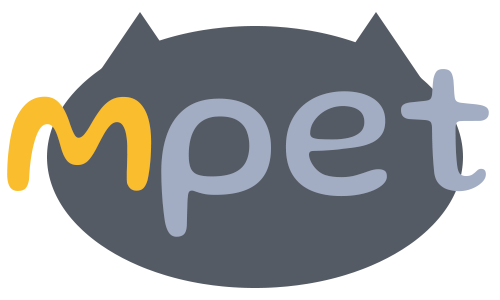
<style>
.page{position:relative;width:500px;height:300px;background:#555b64}
.page>*{position:absolute;margin:0}
.t1{font:203.4px "GlutenDefault-Regular";color:#a2adc3}
.t2{font:203.4px "GlutenDefault-Regular";color:#f9bd2e}
</style>
<div class="page">
<p class="t1" style="left:7px;top:69px;width:482px;height:168px"><span class="t2">m</span>pet</p>
</div>
